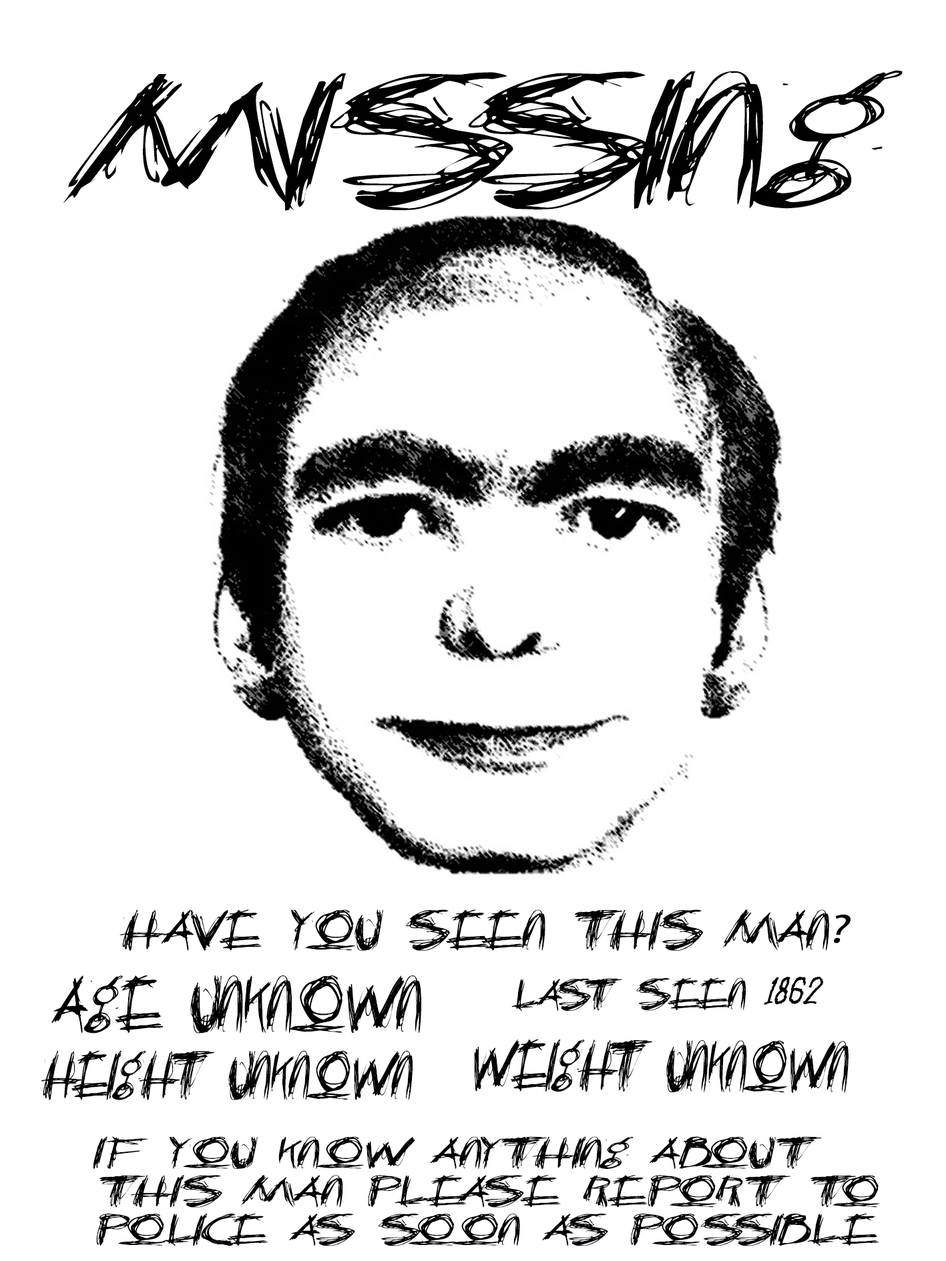
<style>
.page{position:relative;width:946px;height:1261px;background:#ffffff}
.page>*{position:absolute;margin:0}
.t1{font:137.3px "CrazyKiller";color:#000000;font-style:italic;scale:1.53 1}
.t2{font:40.8px "CrazyKiller";color:#000000;font-style:italic;scale:1.23 1}
.t3{font:40.8px "MyriadPro-Regular";color:#000000;font-style:italic;scale:1.23 1}
.t4{font:57.6px "CrazyKiller";color:#000000;font-style:italic}
.t5{font:32.1px "CrazyKiller";color:#000000;font-style:italic;scale:1.22 1}
.t6{font:32.1px "TheTruthWillOut";color:#000000;font-weight:bold;font-style:italic;scale:1.54 1}
.t7{font:52.1px "CrazyKiller";color:#000000;font-style:italic;scale:0.85 1}
.t8{font:49.2px "CrazyKiller";color:#000000;font-style:italic;scale:0.91 1}
.t9{font:32.1px "CrazyKiller";color:#000000;font-style:italic;scale:1.49 1}
</style>
<div class="page">
<p class="t1" style="left:63px;top:70px;width:839px;height:141px">missing</p>
<p class="t2" style="left:119px;top:909px;width:731px;height:42px">Have you seen this man<span class="t3">?</span></p>
<p class="t4" style="left:51px;top:976px;width:370px;height:58px">Age unknown</p>
<p class="t5" style="left:511px;top:977px;width:312px;height:35px">Last seen <span class="t6">1862</span></p>
<p class="t7" style="left:474px;top:1039px;width:374px;height:55px">Weight unknown</p>
<p class="t8" style="left:41px;top:1050px;width:371px;height:50px">Height unknown</p>
<p class="t9" style="left:93px;top:1136px;width:787px;height:110px">If you know anything about<br>this man please report to <br>police as soon as possible</p>
</div>
